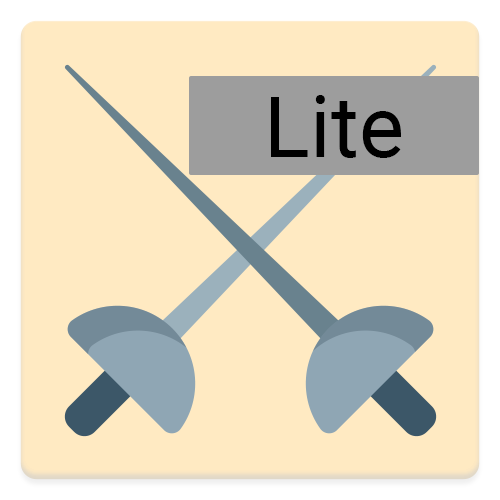
<style>
.page{position:relative;width:500px;height:500px;background:#ffeac2}
.page>*{position:absolute;margin:0}
.t1{font:85px "Roboto-Regular";color:#000000}
</style>
<div class="page">
<p class="t1" style="left:271px;top:95px;width:130px;height:63px">Lite</p>
</div>
